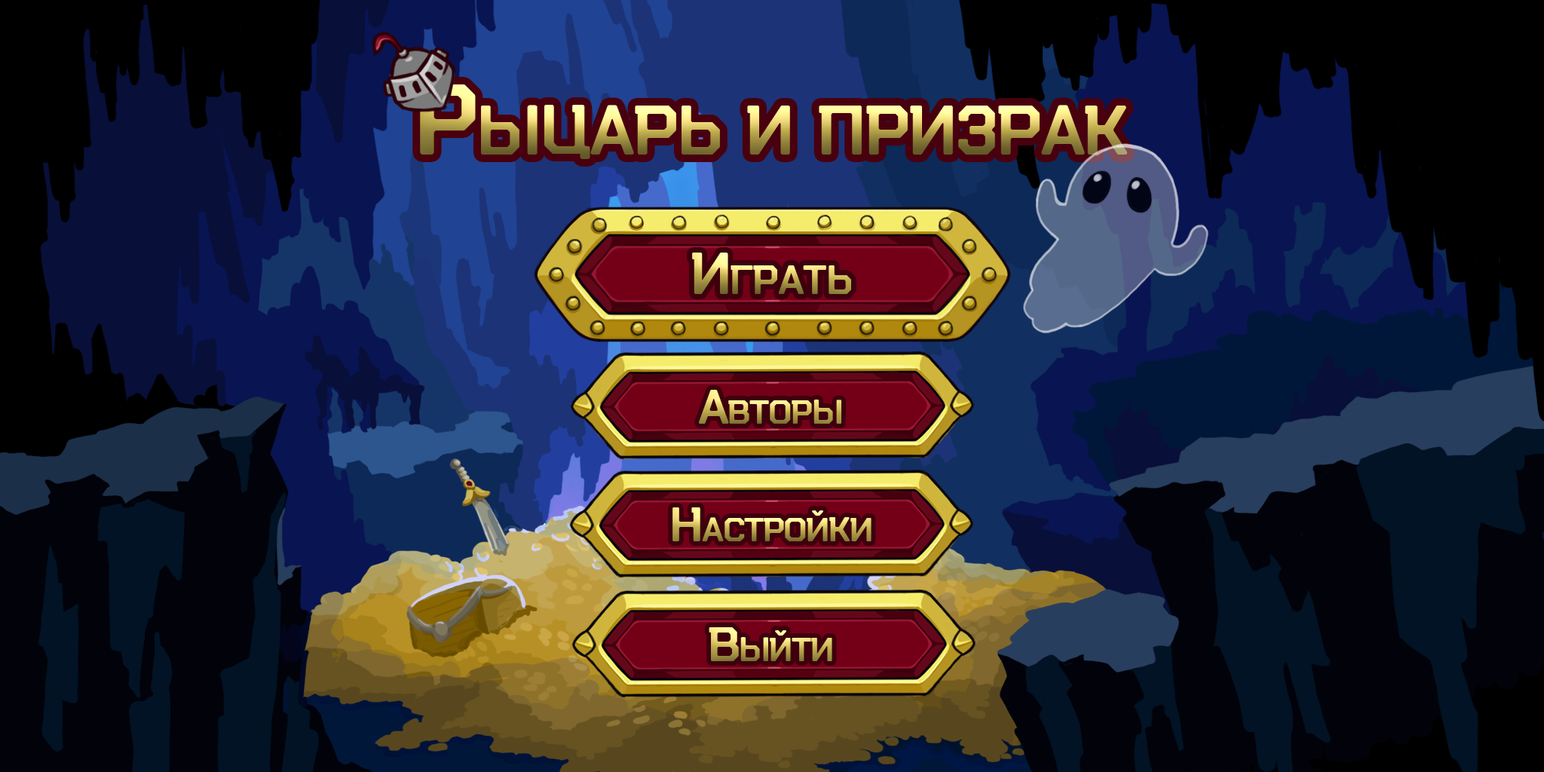
<style>
.page{position:relative;width:1544px;height:772px}
.page>*{position:absolute;margin:0}
.t1{font:100.6px "ArturitoSlab-Bold";letter-spacing:-0.025em;font-variant:small-caps}
.t2{font:58.5px "ArturitoSlab-Bold";letter-spacing:-0.025em;font-variant:small-caps}
.t3{font:48px "ArturitoSlab-Bold";letter-spacing:-0.025em;font-variant:small-caps}
</style>
<div class="page">
<p class="t1" style="left:416px;top:84px;width:711px;height:75px">Рыцарь и призрак</p>
<p class="t2" style="left:692px;top:253px;width:159px;height:41px">Играть</p>
<p class="t3" style="left:699px;top:390px;width:143px;height:34px">Авторы</p>
<p class="t3" style="left:673px;top:507px;width:199px;height:34px">Настройки</p>
<p class="t3" style="left:709px;top:627px;width:123px;height:34px">Выйти</p>
</div>
